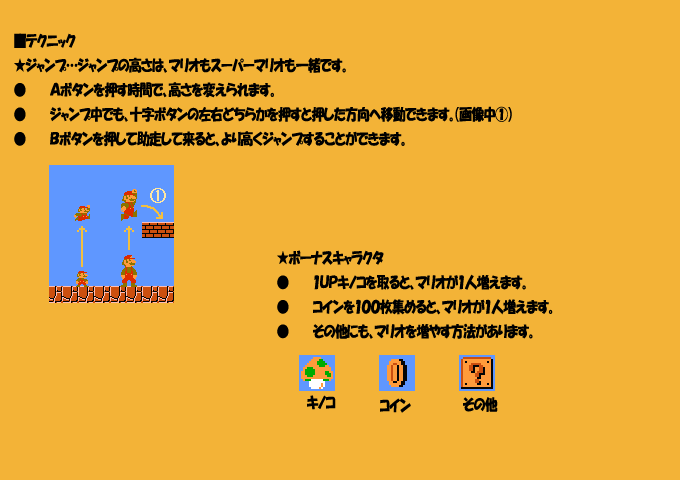
<style>
.page{position:relative;width:680px;height:480px;background:#f3b337}
.page>*{position:absolute;margin:0}
.t1{font:15.4px "HGPSoeiKakupoptai";letter-spacing:-0.015em;color:#000000;scale:0.82 1}
</style>
<div class="page">
<p class="t1" style="left:14px;top:33px;width:498px;height:114px">■テクニック<br>★ジャンプ…ジャンプの高さは、マリオもスーパーマリオも一緒です。<br>● Ａボタンを押す時間で、高さを変えられます。<br>● ジャンプ中でも、十字ボタンの左右どちらかを押すと押した方向へ移動できます。（画像中①）<br>● Ｂボタンを押して助走して来ると、より高くジャンプすることができます。</p>
<p class="t1" style="left:277px;top:250px;width:276px;height:89px">★ボーナスキャラクタ<br>● １ＵＰキノコを取ると、マリオが１人増えます。<br>● コインを１００枚集めると、マリオが１人増えます。<br>● その他にも、マリオを増やす方法があります。</p>
<p class="t1" style="left:307px;top:395px;width:29px;height:15px">キノコ</p>
<p class="t1" style="left:380px;top:398px;width:31px;height:15px">コイン</p>
<p class="t1" style="left:463px;top:397px;width:35px;height:15px">その他</p>
</div>
